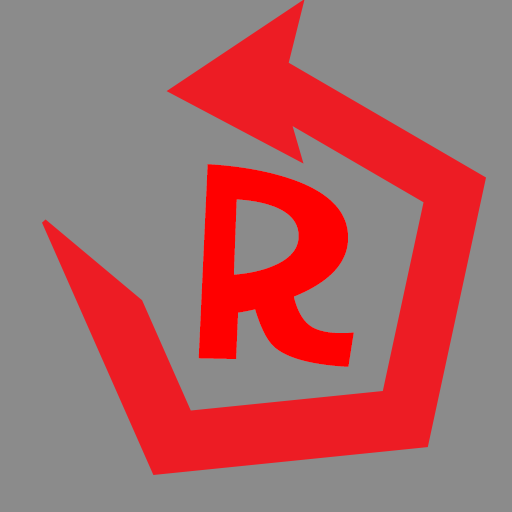
<style>
.page{position:relative;width:512px;height:512px;background:#8b8b8b}
.page>*{position:absolute;margin:0}
.t1{font:291.2px "SFSlapstickComic";color:#ff0000}
</style>
<div class="page">
<p class="t1" style="left:198px;top:164px;width:156px;height:203px">R</p>
</div>
